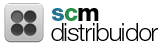
<style>
.page{position:relative;width:166px;height:48px;background:#ffffff}
.page>*{position:absolute;margin:0}
.t1{font:24px "HelveticaNeueLTStd-Hv";letter-spacing:-0.025em;color:#237492}
.t2{font:24px "HelveticaNeueLTStd-Hv";letter-spacing:-0.025em;color:#288d45}
.t3{font:24px "HelveticaNeueLTStd-Hv";letter-spacing:-0.025em;color:#000000}
.t4{font:24px "HelveticaNeueLTStd-Lt";letter-spacing:-0.025em;color:#000000}
</style>
<div class="page">
<p class="t1" style="left:52px;top:8px;width:47px;height:13px">s<span class="t2">c</span><span class="t3">m</span></p>
<p class="t4" style="left:51px;top:23px;width:107px;height:18px">distribuidor</p>
</div>
